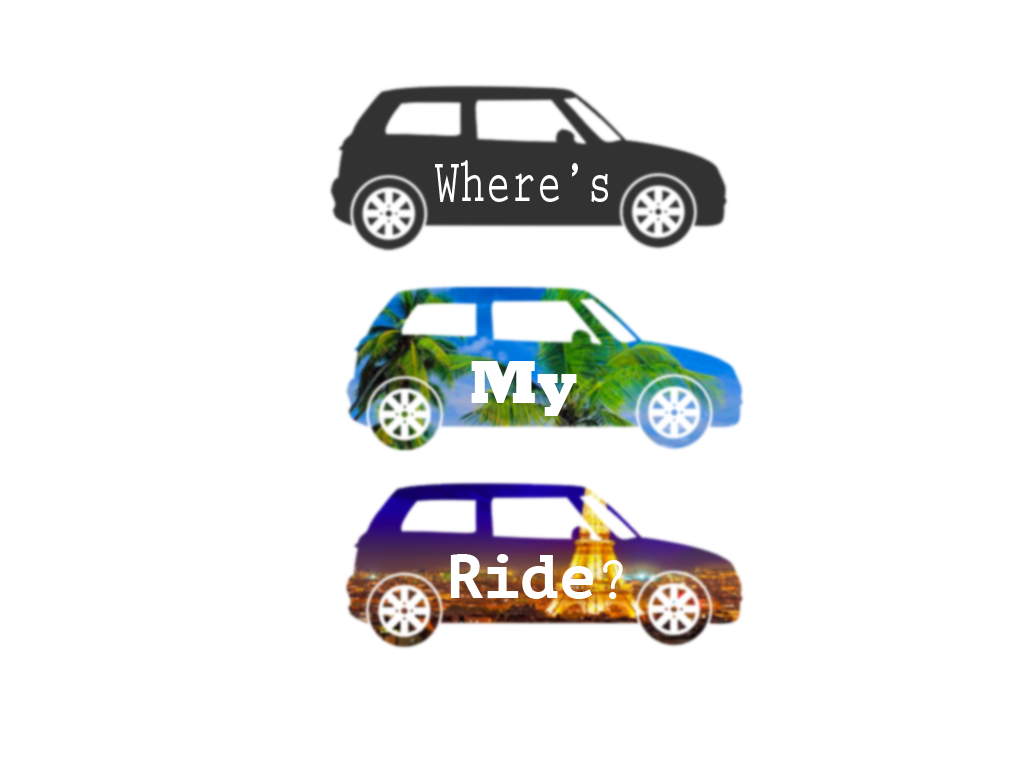
<style>
.page{position:relative;width:1024px;height:768px;background:#ffffff}
.page>*{position:absolute;margin:0}
.t1{font:62px "PrestigeEliteStd-Bd";color:#ffffff;scale:0.69 1}
.t2{font:62px "Rockwell-ExtraBold";color:#ffffff}
.t3{font:62px "PTMono-Bold";color:#ffffff}
.t4{font:62px "PrestigeEliteStd-Bd";color:#ffffff}
</style>
<div class="page">
<p class="t1" style="left:435px;top:160px;width:173px;height:43px">Where’s</p>
<p class="t2" style="left:471px;top:361px;width:106px;height:55px">My</p>
<p class="t3" style="left:450px;top:554px;width:173px;height:45px">Ride<span class="t4">?</span></p>
</div>
